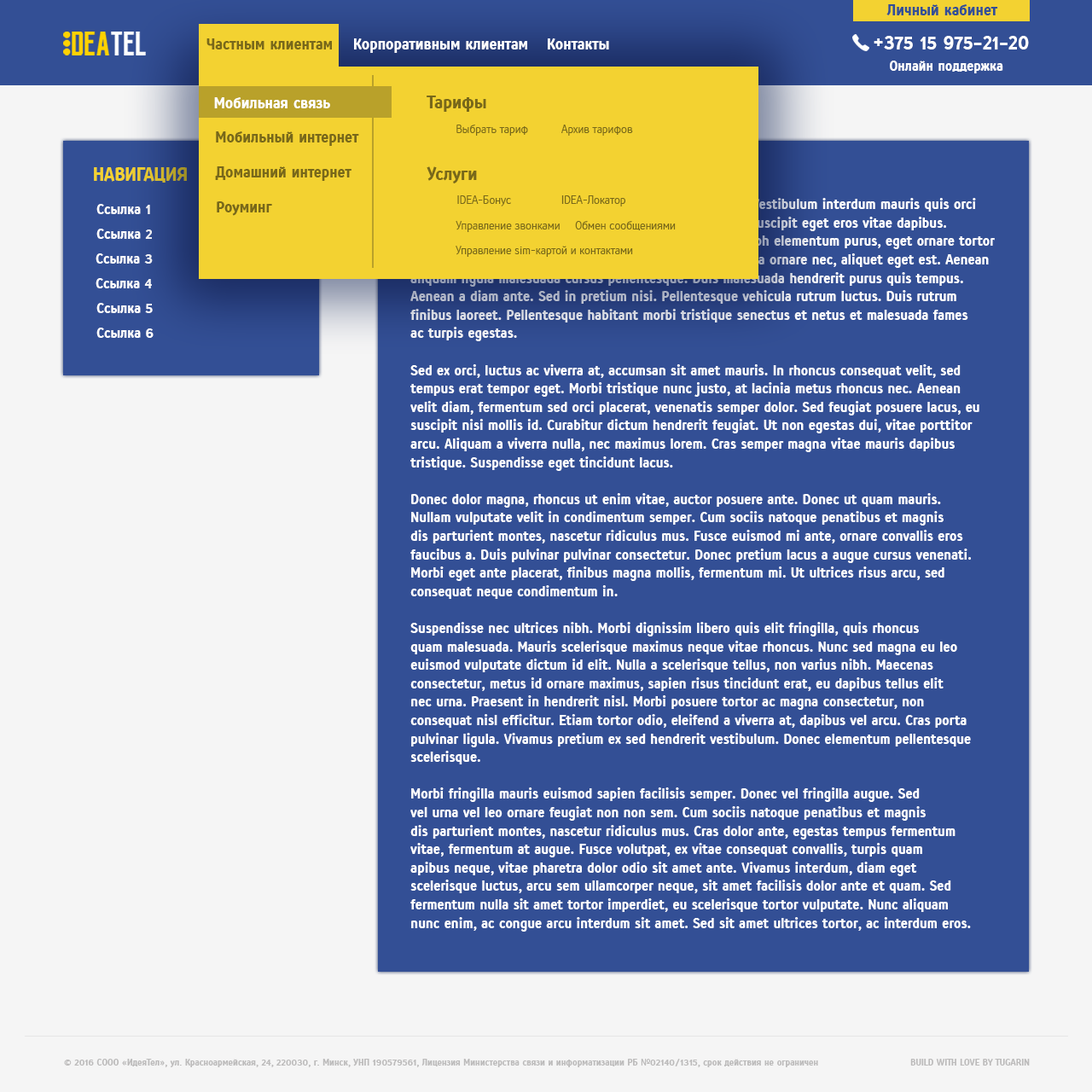
<style>
.page{position:relative;width:1092px;height:1092px;background:#f5f5f5}
.page>*{position:absolute;margin:0}
.t1{font:17.1px "FlexySansNewBD";color:#334f95}
.t2{font:17.1px "FlexySansNewBD";color:#78681a}
.t3{font:17.1px "FlexySansNewBD";color:#ffffff}
.t4{font:20.5px "FlexySansNewBD";color:#ffffff}
.t5{font:15.4px "FlexySansNewBD";color:#ffffff}
.t6{font:19.6px "FlexySansNewBD";color:#78681a}
.t7{font:12.8px "FlexySansNewRG";color:#78681a}
.t8{font:20.5px "FlexySansNewBD";color:#f3d231}
.t9{font:10.2px "FlexySansNewBD";color:#bcbbbb}
.t10{font:10.2px "MyriadPro-Regular";color:#bcbbbb}
</style>
<div class="page">
<p class="t1" style="left:886px;top:4px;width:112px;height:11px">Личный кабинет</p>
<p class="t2" style="left:206px;top:38px;width:126px;height:12px">Частным клиентам</p>
<p class="t3" style="left:354px;top:38px;width:173px;height:15px">Корпоративным клиентам</p>
<p class="t3" style="left:548px;top:38px;width:61px;height:11px">Контакты</p>
<p class="t4" style="left:874px;top:36px;width:155px;height:13px">+375 15 975-21-20</p>
<p class="t5" style="left:890px;top:61px;width:113px;height:12px">Онлайн поддержка</p>
<p class="t3" style="left:214px;top:97px;width:116px;height:12px">Мобильная связь</p>
<p class="t6" style="left:427px;top:96px;width:59px;height:16px">Тарифы</p>
<p class="t7" style="left:456px;top:125px;width:72px;height:11px">Выбрать тариф</p>
<p class="t7" style="left:561px;top:125px;width:72px;height:11px">Архив тарифов</p>
<p class="t2" style="left:216px;top:131px;width:143px;height:15px">Мобильный интернет</p>
<p class="t8" style="left:94px;top:167px;width:93px;height:16px">НАВИГАЦИЯ</p>
<p class="t2" style="left:215px;top:166px;width:136px;height:15px">Домашний интернет</p>
<p class="t6" style="left:427px;top:166px;width:50px;height:17px">Услуги</p>
<p class="t5" style="left:410px;top:198px;width:585px;height:734px">Lorem ipsum dolor sit amet, consectetur adipiscing elit. Vestibulum interdum mauris quis orci<br>ornare dapibus. Sed id lobortis elit, eu faucibus erat. In suscipit eget eros vitae dapibus.<br>Aliquam dapibus, libero sed tristique consequat, tellus nibh elementum purus, eget ornare tortor<br>purus at nibh. Sed vel quam ligula. Donec ex nisi, rutrum a ornare nec, aliquet eget est. Aenean<br>aliquam ligula malesuada cursus pellentesque. Duis malesuada hendrerit purus quis tempus.<br>Aenean a diam ante. Sed in pretium nisi. Pellentesque vehicula rutrum luctus. Duis rutrum<br>finibus laoreet. Pellentesque habitant morbi tristique senectus et netus et malesuada fames<br>ac turpis egestas.<br><br>Sed ex orci, luctus ac viverra at, accumsan sit amet mauris. In rhoncus consequat velit, sed<br>tempus erat tempor eget. Morbi tristique nunc justo, at lacinia metus rhoncus nec. Aenean<br>velit diam, fermentum sed orci placerat, venenatis semper dolor. Sed feugiat posuere lacus, eu<br>suscipit nisi mollis id. Curabitur dictum hendrerit feugiat. Ut non egestas dui, vitae porttitor<br>arcu. Aliquam a viverra nulla, nec maximus lorem. Cras semper magna vitae mauris dapibus<br>tristique. Suspendisse eget tincidunt lacus.<br><br>Donec dolor magna, rhoncus ut enim vitae, auctor posuere ante. Donec ut quam mauris.<br>Nullam vulputate velit in condimentum semper. Cum sociis natoque penatibus et magnis<br>dis parturient montes, nascetur ridiculus mus. Fusce euismod mi ante, ornare convallis eros<br>faucibus a. Duis pulvinar pulvinar consectetur. Donec pretium lacus a augue cursus venenati.<br>Morbi eget ante placerat, finibus magna mollis, fermentum mi. Ut ultrices risus arcu, sed<br>consequat neque condimentum in.<br><br>Suspendisse nec ultrices nibh. Morbi dignissim libero quis elit fringilla, quis rhoncus<br>quam malesuada. Mauris scelerisque maximus neque vitae rhoncus. Nunc sed magna eu leo<br>euismod vulputate dictum id elit. Nulla a scelerisque tellus, non varius nibh. Maecenas<br>consectetur, metus id ornare maximus, sapien risus tincidunt erat, eu dapibus tellus elit<br>nec urna. Praesent in hendrerit nisl. Morbi posuere tortor ac magna consectetur, non<br>consequat nisl efficitur. Etiam tortor odio, eleifend a viverra at, dapibus vel arcu. Cras porta<br>pulvinar ligula. Vivamus pretium ex sed hendrerit vestibulum. Donec elementum pellentesque<br>scelerisque.<br><br>Morbi fringilla mauris euismod sapien facilisis semper. Donec vel fringilla augue. Sed<br>vel urna vel leo ornare feugiat non non sem. Cum sociis natoque penatibus et magnis<br>dis parturient montes, nascetur ridiculus mus. Cras dolor ante, egestas tempus fermentum<br>vitae, fermentum at augue. Fusce volutpat, ex vitae consequat convallis, turpis quam <br>apibus neque, vitae pharetra dolor odio sit amet ante. Vivamus interdum, diam eget<br>scelerisque luctus, arcu sem ullamcorper neque, sit amet facilisis dolor ante et quam. Sed <br>fermentum nulla sit amet tortor imperdiet, eu scelerisque tortor vulputate. Nunc aliquam<br>nunc enim, ac congue arcu interdum sit amet. Sed sit amet ultrices tortor, ac interdum eros.</p>
<p class="t7" style="left:457px;top:195px;width:54px;height:11px">IDEA-Бонус</p>
<p class="t7" style="left:561px;top:195px;width:64px;height:11px">IDEA-Локатор</p>
<p class="t5" style="left:96px;top:204px;width:54px;height:10px">Ссылка 1</p>
<p class="t2" style="left:217px;top:201px;width:55px;height:15px">Роуминг</p>
<p class="t7" style="left:456px;top:220px;width:104px;height:12px">Управление звонками</p>
<p class="t7" style="left:575px;top:221px;width:101px;height:9px">Обмен сообщениями</p>
<p class="t5" style="left:96px;top:229px;width:56px;height:10px">Ссылка 2</p>
<p class="t7" style="left:456px;top:246px;width:177px;height:11px">Управление sim-картой и контактами</p>
<p class="t5" style="left:96px;top:253px;width:57px;height:11px">Ссылка 3</p>
<p class="t5" style="left:96px;top:278px;width:56px;height:10px">Ссылка 4</p>
<p class="t5" style="left:96px;top:303px;width:57px;height:10px">Ссылка 5</p>
<p class="t5" style="left:96px;top:328px;width:58px;height:10px">Ссылка 6</p>
<p class="t9" style="left:64px;top:1059px;width:754px;height:8px">© 2016 СООО «ИдеяТел», ул. Красноармейская, 24, 220030, г. Минск, УНП 190579561, Лицензия Министерства связи и информатизации РБ <span class="t10">№</span>02140/1315, срок действия не ограничен</p>
<p class="t9" style="left:910px;top:1059px;width:120px;height:7px">BUILD WITH LOVE BY TUGARIN</p>
</div>
